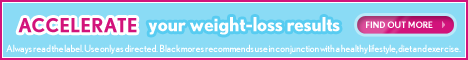
<style>
.page{position:relative;width:468px;height:60px;background:#8adbf5}
.page>*{position:absolute;margin:0}
.t1{font:18.9px "NobelBold";color:#ffffff}
.t2{font:18.9px "NobelBold";color:#d2137b;text-transform:uppercase}
.t3{font:8.8px "NobelBold";color:#ffffff}
.t4{font:10px "NobelRegular";letter-spacing:-0.03em;color:#ffffff}
</style>
<div class="page">
<p class="t1" style="left:148px;top:17px;width:192px;height:18px">your weight-loss results</p>
<p class="t2" style="left:18px;top:18px;width:119px;height:15px">Accelerate</p>
<p class="t3" style="left:366px;top:21px;width:67px;height:7px">FIND OUT MORE</p>
<p class="t4" style="left:6px;top:44px;width:455px;height:10px">Always read the label. Use only as directed.  Blackmores recommends use in conjunction with a healthy lifestyle, diet and exercise.</p>
</div>
